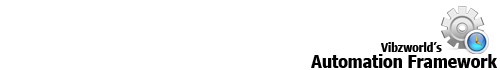
<style>
.page{position:relative;width:500px;height:70px;background:#ffffff}
.page>*{position:absolute;margin:0}
.t1{font:18px "Nina-Bold";color:#000000}
.t2{font:12px "Nina-Bold";color:#000000}
</style>
<div class="page">
<p class="t1" style="left:311px;top:54px;width:186px;height:14px">Automation Framework</p>
<p class="t2" style="left:381px;top:42px;width:61px;height:10px">Vibzworld’s</p>
</div>
